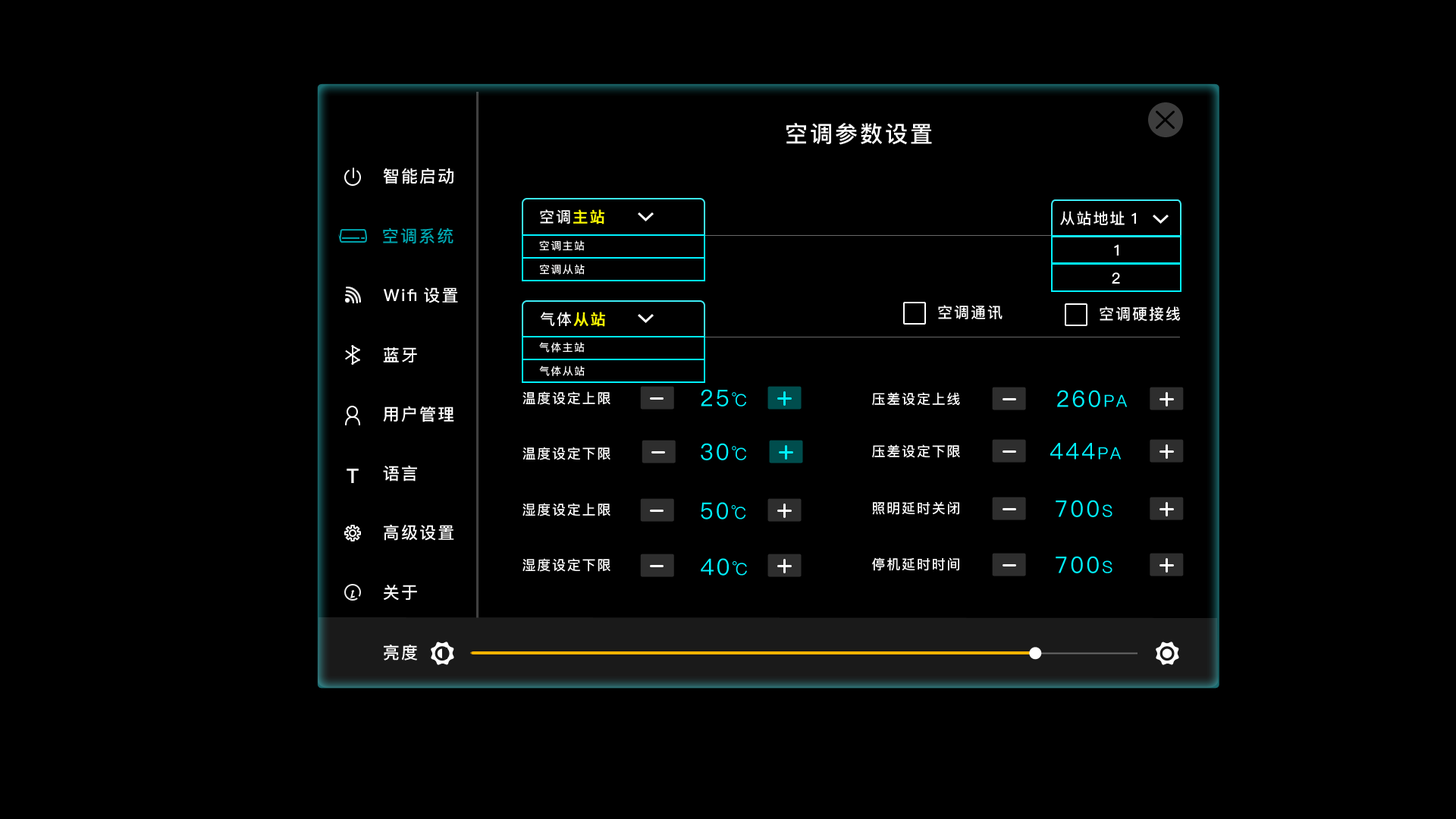
<style>
.page{position:relative;width:1456px;height:819px;background:#000000}
.page>*{position:absolute;margin:0}
.t1{font:22.7px "PingFang-SC-Bold";letter-spacing:0.1em;color:#ffffff}
.t2{font:16.7px "PingFang-SC-Bold";letter-spacing:0.1em;color:#ffffff}
.t3{font:15.2px "PingFang-SC-Bold";letter-spacing:0.1em;color:#ffffff}
.t4{font:15.2px "PingFang-SC-Bold";letter-spacing:0.1em;color:#fbf802;font-weight:bold}
.t5{font:16.7px "PingFang-SC-Bold";letter-spacing:0.1em;color:#00a5af}
.t6{font:10.6px "PingFang-SC-Bold";letter-spacing:0.1em;color:#ffffff}
.t7{font:22.7px "PingFang-SC-Medium";letter-spacing:0.1em;color:#00f1ff}
.t8{font:16.7px "PingFang-SC-Medium";letter-spacing:0.1em;color:#00f1ff}
.t9{font:13.6px "PingFang-SC-Bold";letter-spacing:0.1em;color:#ffffff}
.t10{font:19.8px "PingFang-SC-Heavy";letter-spacing:0.1em;color:#ffffff}
</style>
<div class="page">
<p class="t1" style="left:786px;top:123px;width:146px;height:22px">空调参数设置</p>
<p class="t2" style="left:383px;top:168px;width:70px;height:16px">智能启动</p>
<p class="t3" style="left:540px;top:209px;width:64px;height:15px">空调<span class="t4">主站</span></p>
<p class="t3" style="left:1060px;top:211px;width:76px;height:14px">从站地址1</p>
<p class="t5" style="left:383px;top:227px;width:70px;height:17px">空调系统</p>
<p class="t6" style="left:539px;top:240px;width:46px;height:11px">空调主站</p>
<p class="t3" style="left:1114px;top:244px;width:5px;height:12px">1</p>
<p class="t6" style="left:540px;top:264px;width:45px;height:11px">空调从站</p>
<p class="t3" style="left:1112px;top:272px;width:8px;height:12px">2</p>
<p class="t2" style="left:384px;top:287px;width:74px;height:16px">Wifi设置</p>
<p class="t3" style="left:938px;top:305px;width:65px;height:14px">空调通讯</p>
<p class="t3" style="left:540px;top:312px;width:65px;height:15px">气体<span class="t4">从站</span></p>
<p class="t3" style="left:1100px;top:306px;width:81px;height:16px">空调硬接线</p>
<p class="t2" style="left:383px;top:347px;width:34px;height:15px">蓝牙</p>
<p class="t6" style="left:539px;top:342px;width:46px;height:11px">气体主站</p>
<p class="t6" style="left:539px;top:366px;width:46px;height:10px">气体从站</p>
<p class="t7" style="left:701px;top:389px;width:45px;height:17px">25<span class="t8">℃</span></p>
<p class="t7" style="left:1057px;top:390px;width:71px;height:17px">260<span class="t8">PA</span></p>
<p class="t9" style="left:522px;top:391px;width:88px;height:14px">温度设定上限</p>
<p class="t9" style="left:872px;top:392px;width:88px;height:14px">压差设定上线</p>
<p class="t2" style="left:383px;top:406px;width:71px;height:16px">用户管理</p>
<p class="t9" style="left:522px;top:447px;width:88px;height:13px">温度设定下限</p>
<p class="t7" style="left:701px;top:443px;width:45px;height:17px">30<span class="t8">℃</span></p>
<p class="t9" style="left:872px;top:444px;width:88px;height:14px">压差设定下限</p>
<p class="t7" style="left:1050px;top:443px;width:72px;height:17px">444<span class="t8">PA</span></p>
<p class="t10" style="left:347px;top:469px;width:12px;height:14px">T</p>
<p class="t2" style="left:383px;top:465px;width:34px;height:17px">语言</p>
<p class="t9" style="left:522px;top:503px;width:88px;height:13px">湿度设定上限</p>
<p class="t7" style="left:701px;top:502px;width:45px;height:17px">50<span class="t8">℃</span></p>
<p class="t9" style="left:872px;top:501px;width:87px;height:14px">照明延时关闭</p>
<p class="t7" style="left:1056px;top:500px;width:56px;height:17px">700<span class="t8">S</span></p>
<p class="t2" style="left:384px;top:524px;width:70px;height:17px">高级设置</p>
<p class="t9" style="left:872px;top:557px;width:87px;height:14px">停机延时时间</p>
<p class="t7" style="left:1056px;top:556px;width:56px;height:17px">700<span class="t8">S</span></p>
<p class="t9" style="left:522px;top:558px;width:88px;height:14px">湿度设定下限</p>
<p class="t7" style="left:701px;top:558px;width:46px;height:18px">40<span class="t8">℃</span></p>
<p class="t2" style="left:384px;top:585px;width:33px;height:16px">关于</p>
<p class="t2" style="left:384px;top:645px;width:33px;height:15px">亮度</p>
</div>
